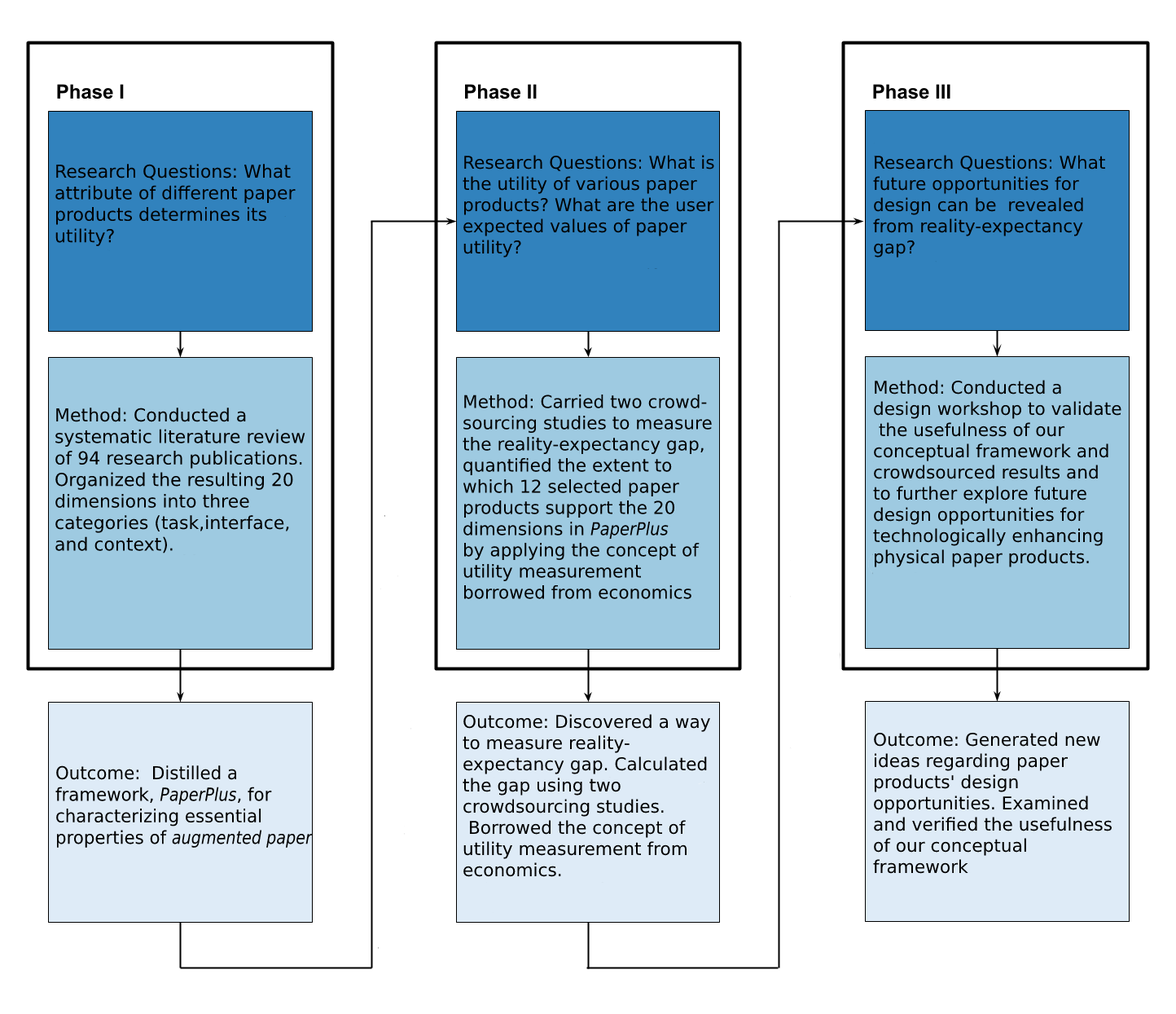
<style>
.page{position:relative;width:1176px;height:1014px;background:#ffffff}
.page>*{position:absolute;margin:0}
.t1{font:17.6px "DejaVuSans";color:#000000}
.t2{font:17.9px "DejaVuSans";color:#000000}
.t3{font:17.6px "DejaVuSansCondensed-Oblique";color:#000000}
.t4{font:17.9px "DejaVuSans";color:#000000;scale:0.97 1}
.t5{font:17.9px "DejaVuSansCondensed-Oblique";color:#000000;scale:0.97 1}
</style>
<div class="page">
<p class="t1" style="left:463px;top:155px;width:252px;height:102px">Research Questions: What is<br>the utility of various paper <br>products? What are the user <br>expected values of paper <br>utility?</p>
<p class="t1" style="left:873px;top:155px;width:233px;height:102px">Research Questions: What <br>future opportunities for <br>design can be  revealed <br>from reality-expectancy <br>gap?</p>
<p class="t2" style="left:55px;top:164px;width:241px;height:82px">Research Questions: What <br>attribute of different paper <br>products determines its <br>utility?</p>
<p class="t1" style="left:873px;top:380px;width:249px;height:187px">Method: Conducted a <br>design workshop to validate<br> the usefulness of our<br>conceptual framework and <br>crowdsourced results and <br>to further explore future <br>design opportunities for <br>technologically enhancing<br>physical paper products.</p>
<p class="t1" style="left:463px;top:394px;width:249px;height:205px">Method: Carried two crowd-<br>sourcing studies to measure <br>the reality-expectancy gap, <br>quantified the extent to <br>which 12 selected paper <br>products support the 20 <br>dimensions in <span class="t3">PaperPlus <br></span>by applying the concept of <br>utility measurement <br>borrowed from economics</p>
<p class="t2" style="left:55px;top:407px;width:251px;height:146px">Method: Conducted a <br>systematic literature review <br>of 94 research publications.<br>Organized the resulting 20 <br>dimensions into three <br>categories (task,interface, <br>and context).</p>
<p class="t1" style="left:463px;top:714px;width:247px;height:163px">Outcome: Discovered a way <br>to measure reality-<br>expectancy gap. Calculated <br>the gap using two <br>crowdsourcing studies.<br> Borrowed the concept of <br>utility measurement from <br>economics.</p>
<p class="t1" style="left:873px;top:732px;width:239px;height:141px">Outcome: Generated new <br>ideas regarding paper <br>products' design <br>opportunities. Examined <br>and verified the usefulness <br>of our conceptual <br>framework</p>
<p class="t4" style="left:55px;top:765px;width:258px;height:82px">Outcome:  Distilled a <br>framework, <span class="t5">PaperPlus</span>, for <br>characterizing essential <br>properties of <span class="t5">augmented paper</span></p>
</div>
